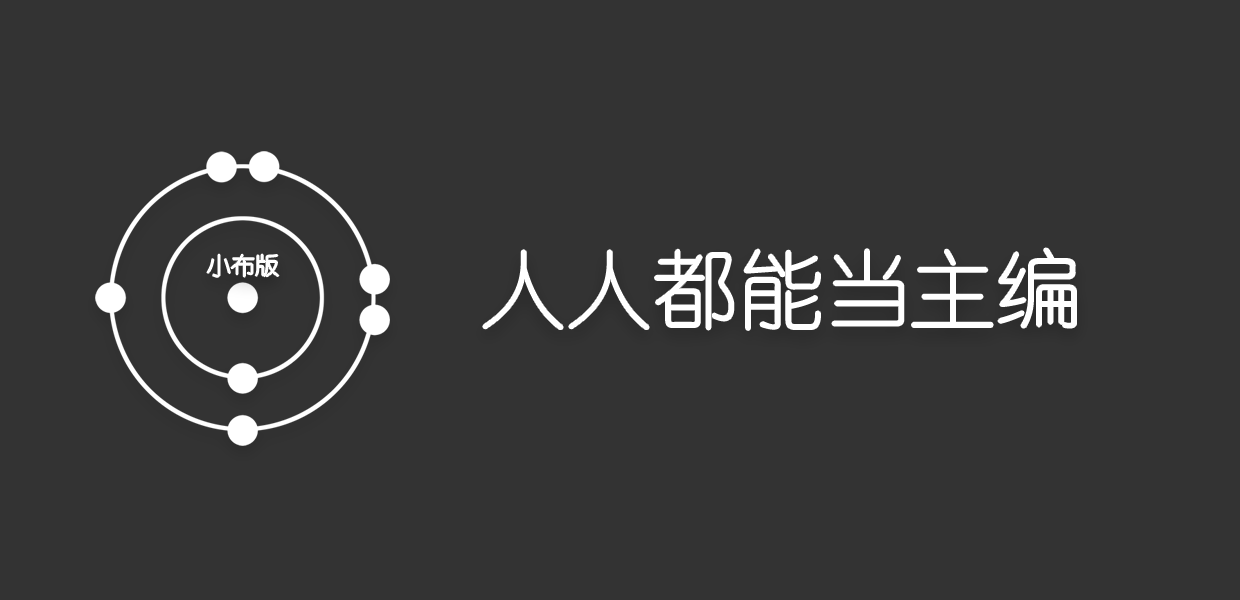
<style>
.page{position:relative;width:1240px;height:600px;background:#333333}
.page>*{position:absolute;margin:0}
.t1{font:24px "YouYuan";color:#ffffff}
.t2{font:86px "YouYuan";color:#ffffff}
</style>
<div class="page">
<p class="t1" style="left:207px;top:254px;width:72px;height:23px">小布版</p>
<p class="t2" style="left:483px;top:248px;width:593px;height:82px">人人都能当主编</p>
</div>
